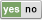
<style>
.page{position:relative;width:42px;height:20px;background:#dedede}
.page>*{position:absolute;margin:0}
.t1{font:10px "ArialMT";color:#ffffff;font-weight:bold}
.t2{font:10px "ArialMT";color:#000000;font-weight:bold}
</style>
<div class="page">
<p class="t1" style="left:3px;top:7px;width:17px;height:8px">yes</p>
<p class="t2" style="left:25px;top:7px;width:12px;height:6px">no</p>
</div>
